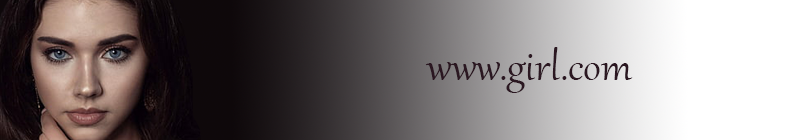
<style>
.page{position:relative;width:800px;height:140px}
.page>*{position:absolute;margin:0}
.t1{font:50px "Gabriola";color:#2b1721}
</style>
<div class="page">
<p class="t1" style="left:425px;top:47px;width:208px;height:46px">www.girl.com</p>
</div>
